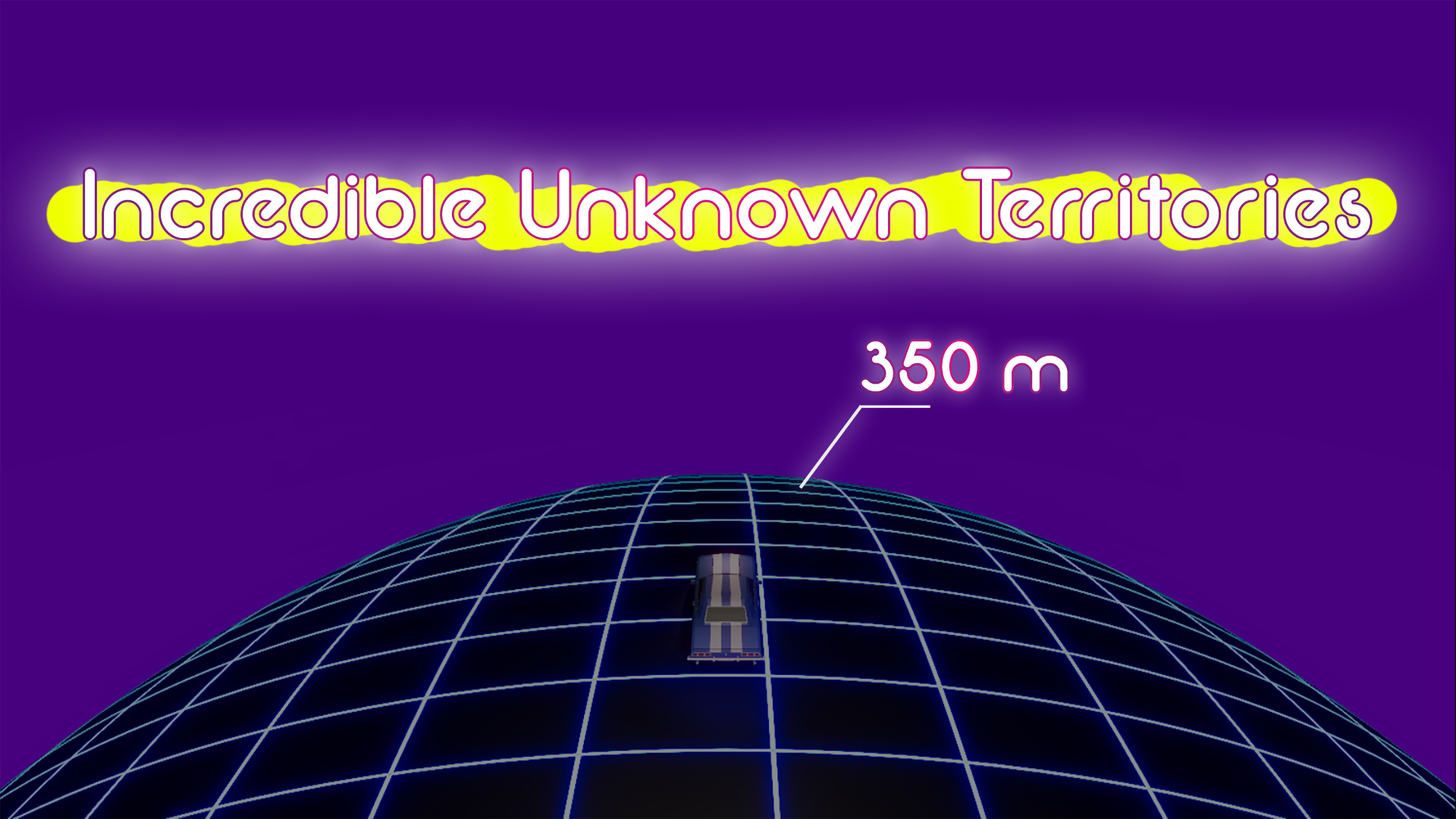
<style>
.page{position:relative;width:1456px;height:819px}
.page>*{position:absolute;margin:0}
.t1{font:98.6px "Neon80s";color:#ffffff}
.t2{font:73px "Neon80s";color:#ffffff}
</style>
<div class="page">
<p class="t1" style="left:85px;top:168px;width:1285px;height:70px">Incredible Unknown Territories</p>
<p class="t2" style="left:861px;top:341px;width:207px;height:50px">350 m</p>
</div>
